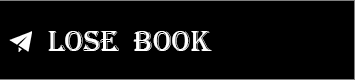
<style>
.page{position:relative;width:355px;height:80px;background:#000000}
.page>*{position:absolute;margin:0}
.t1{font:30px "Algerian";color:#ffffff}
</style>
<div class="page">
<p class="t1" style="left:48px;top:31px;width:164px;height:20px">lose  book</p>
</div>
